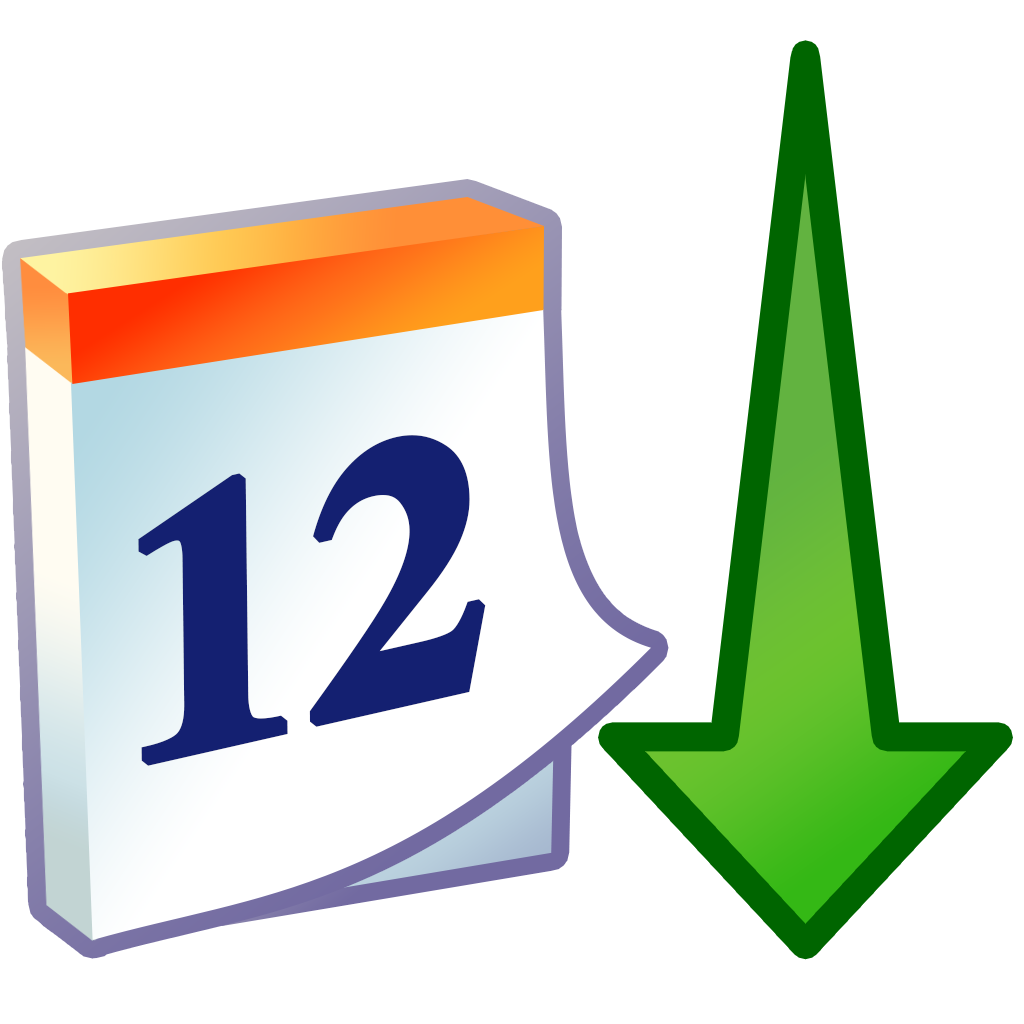
<style>
.page{position:relative;width:1024px;height:1024px;background:#ffffff}
.page>*{position:absolute;margin:0}
.t1{font:378.1px "Times-Bold";letter-spacing:-0.01em;color:#142071;font-weight:bold}
</style>
<div class="page">
<p class="t1" style="left:138px;top:435px;width:348px;height:331px;rotate:-13deg">12</p>
</div>
